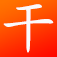
<style>
.page{position:relative;width:57px;height:57px}
.page>*{position:absolute;margin:0}
.t1{font:60px "STKaiti";color:#f9fafb}
</style>
<div class="page">
<p class="t1" style="left:3px;top:4px;width:51px;height:49px">干</p>
</div>
